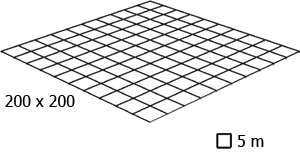
<style>
.page{position:relative;width:300px;height:157px;background:#ffffff}
.page>*{position:absolute;margin:0}
.t1{font:12px "Tahoma";color:#000000}
</style>
<div class="page">
<p class="t1" style="left:5px;top:95px;width:70px;height:12px">200 x 200</p>
<p class="t1" style="left:237px;top:135px;width:27px;height:12px">5 m</p>
</div>
